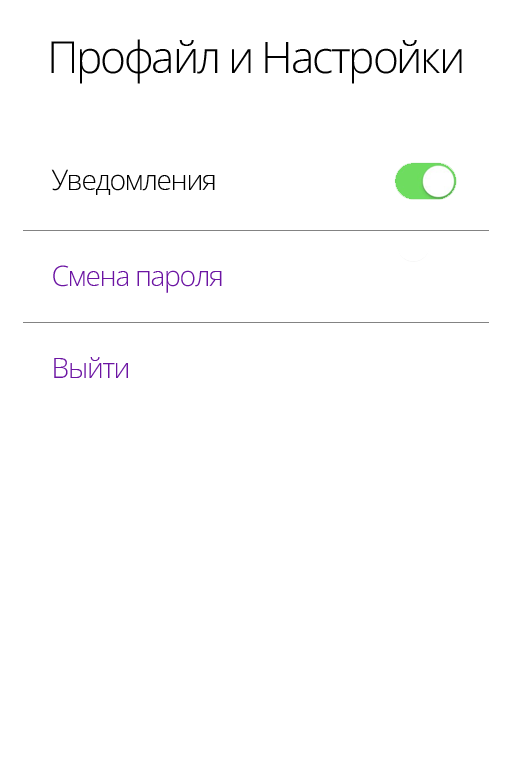
<style>
.page{position:relative;width:512px;height:772px;background:#ffffff}
.page>*{position:absolute;margin:0}
.t1{font:44.1px "OpenSansRoman-Light";letter-spacing:-0.05em;color:#000000}
.t2{font:28.3px "OpenSansRoman-Light";letter-spacing:-0.05em;color:#000000}
.t3{font:28.3px "OpenSansRoman-Light";letter-spacing:-0.05em;color:#6c15a3}
</style>
<div class="page">
<p class="t1" style="left:51px;top:39px;width:411px;height:45px">Профайл и Настройки</p>
<p class="t2" style="left:51px;top:169px;width:164px;height:26px">Уведомления</p>
<p class="t3" style="left:53px;top:265px;width:169px;height:28px">Смена пароля</p>
<p class="t3" style="left:54px;top:357px;width:74px;height:21px">Выйти</p>
</div>
